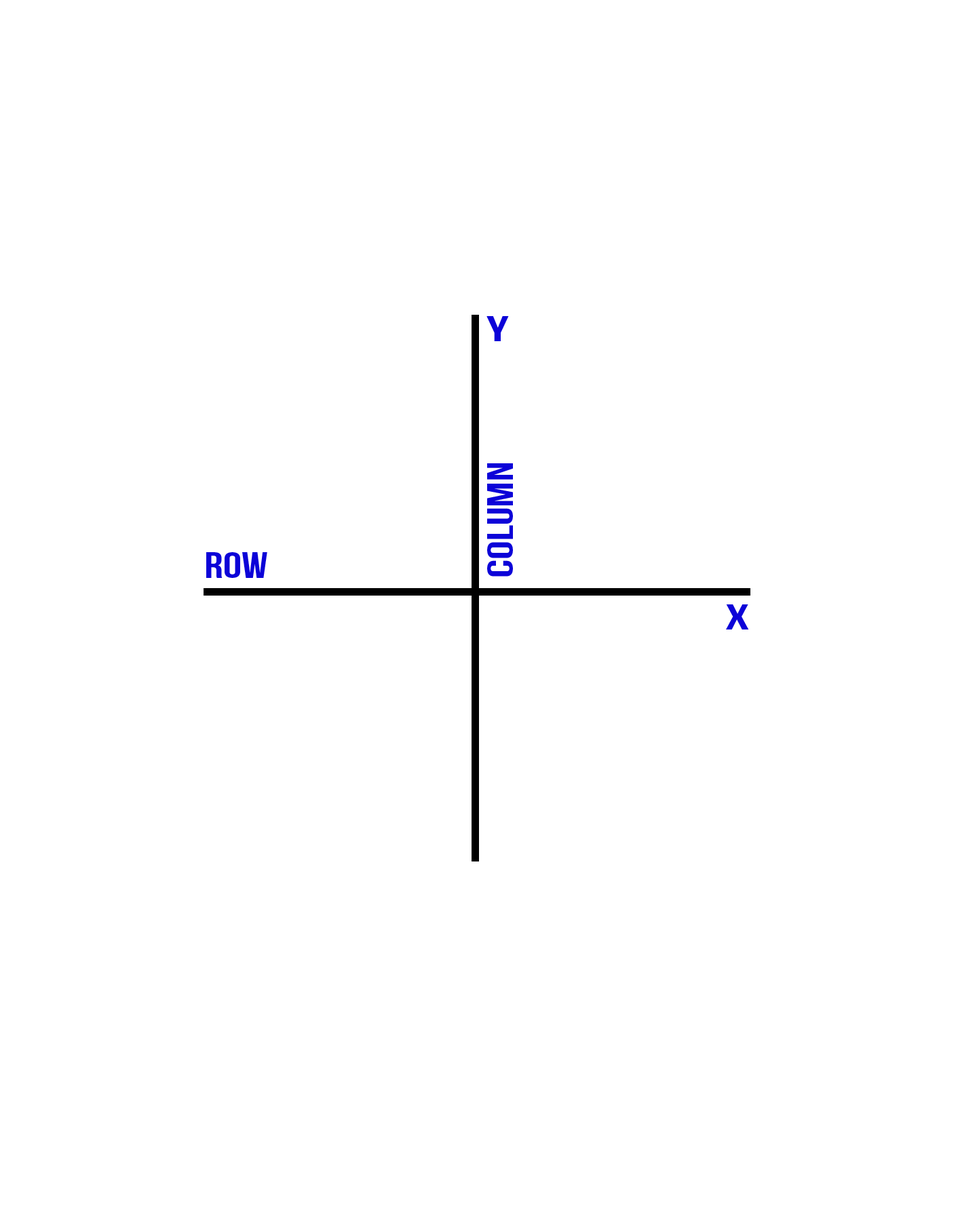
<style>
.page{position:relative;width:977px;height:1221px;background:#ffffff}
.page>*{position:absolute;margin:0}
.t1{font:35px "BebasNeue";color:#0c02d8;scale:1.61 1}
.t2{font:36.3px "BebasNeue";color:#0c02d8;scale:1.29 1}
.t3{font:36.4px "BebasNeue";color:#0c02d8;scale:1.28 1}
</style>
<div class="page">
<p class="t1" style="left:486px;top:316px;width:23px;height:25px">y</p>
<p class="t2" style="left:487px;top:463px;width:26px;height:114px;rotate:-90deg">column</p>
<p class="t3" style="left:206px;top:552px;width:61px;height:26px">row</p>
<p class="t1" style="left:726px;top:604px;width:23px;height:25px">x</p>
</div>
